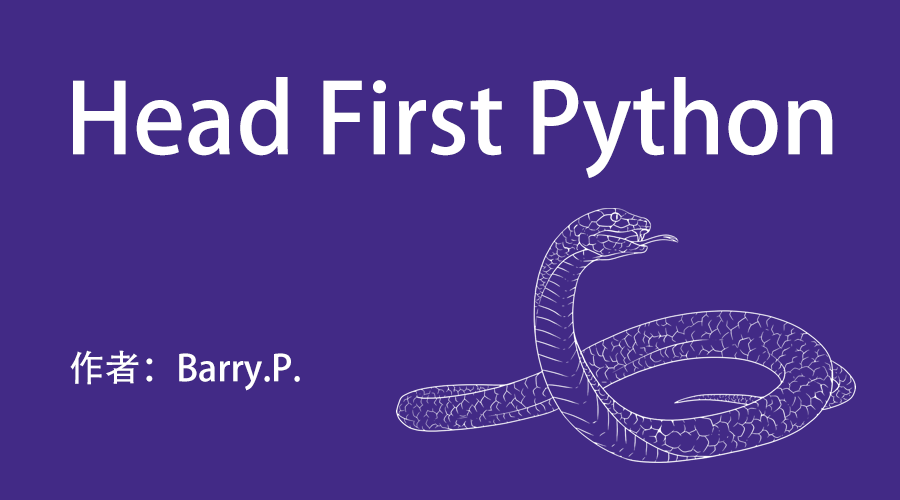
<style>
.page{position:relative;width:900px;height:500px;background:#422a86}
.page>*{position:absolute;margin:0}
.t1{font:96px "AdobeHeitiStd-Regular";color:#ffffff}
.t2{font:36px "AdobeHeitiStd-Regular";color:#ffffff}
</style>
<div class="page">
<p class="t1" style="left:73px;top:77px;width:760px;height:101px">Head First Python</p>
<p class="t2" style="left:70px;top:350px;width:230px;height:41px">作者：Barry.P.</p>
</div>
